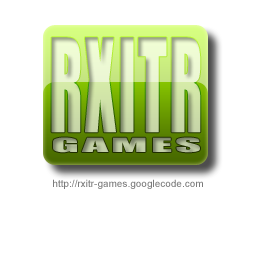
<style>
.page{position:relative;width:256px;height:256px;background:#ffffff}
.page>*{position:absolute;margin:0}
.t1{font:120px/20px "Impact";letter-spacing:0.05em;scale:0.52 1}
.t2{font:18px/20px "Impact";letter-spacing:0.05em;scale:2.83 1}
.t3{font:10px "ArialMT";color:#7c7c7c}
</style>
<div class="page">
<p class="t1" style="left:51px;top:37px;width:150px;height:116px;text-align:center">RXITR<br><span class="t2">GAMES</span></p>
<p class="t3" style="left:53px;top:179px;width:150px;height:10px">http://rxitr-games.googlecode.com</p>
</div>
